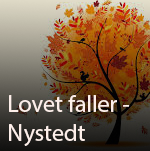
<style>
.page{position:relative;width:150px;height:151px}
.page>*{position:absolute;margin:0}
.t1{font:24px "MyriadPro-Regular";color:#fdefea}
</style>
<div class="page">
<p class="t1" style="left:9px;top:95px;width:121px;height:51px">Lovet faller -<br>Nystedt</p>
</div>
